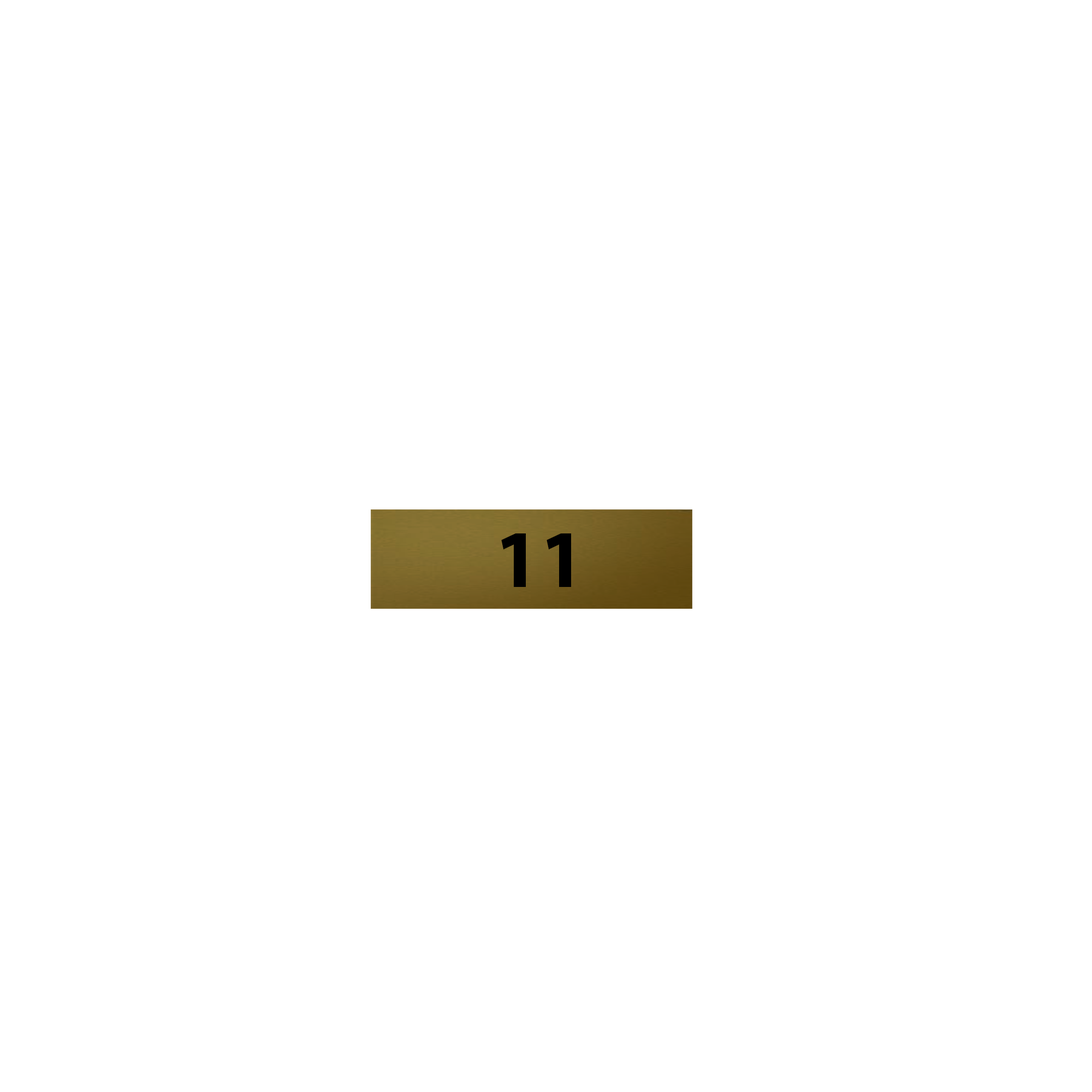
<style>
.page{position:relative;width:1092px;height:1092px;background:#ffffff}
.page>*{position:absolute;margin:0}
.t1{font:81.9px "MyriadPro-Bold";color:#000000}
</style>
<div class="page">
<p class="t1" style="left:501px;top:533px;width:70px;height:54px">11</p>
</div>
